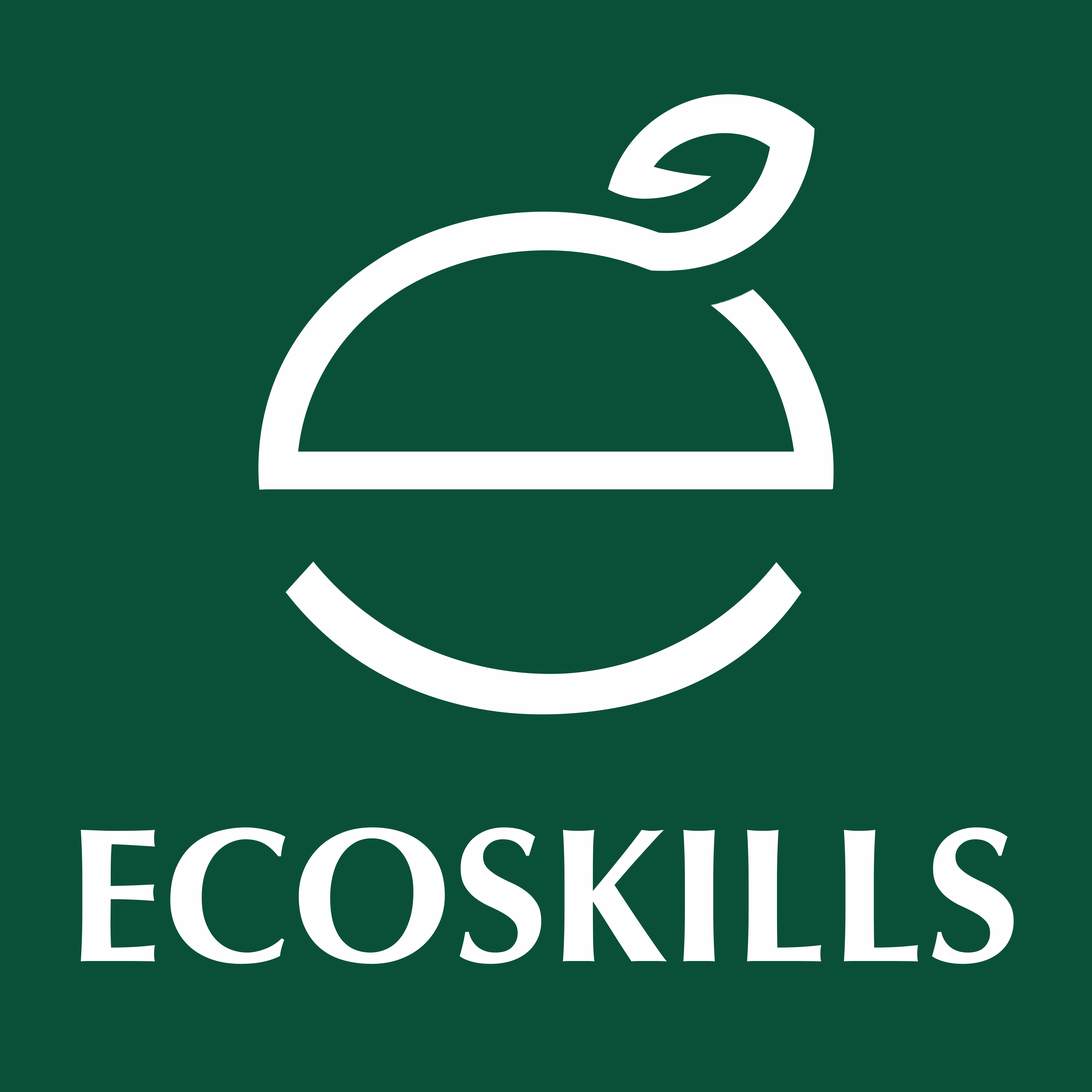
<style>
.page{position:relative;width:1092px;height:1092px;background:#0a5038}
.page>*{position:absolute;margin:0}
.t1{font:191.4px "Optima-Bold";letter-spacing:0.005em;color:#fefefe;text-transform:uppercase}
</style>
<div class="page">
<p class="t1" style="left:81px;top:827px;width:933px;height:137px">ecoskills</p>
</div>
